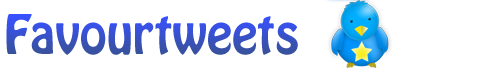
<style>
.page{position:relative;width:490px;height:70px;background:#ffffff}
.page>*{position:absolute;margin:0}
.t1{font:48px "HoboStd"}
</style>
<div class="page">
<p class="t1" style="left:6px;top:14px;width:292px;height:41px">Favourtweets</p>
</div>
